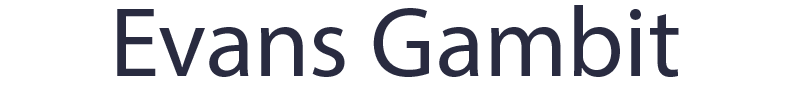
<style>
.page{position:relative;width:800px;height:100px;background:#ffffff}
.page>*{position:absolute;margin:0}
.t1{font:100px "MyriadPro-Regular";color:#292b40}
</style>
<div class="page">
<p class="t1" style="left:117px;top:5px;width:562px;height:72px">Evans Gambit</p>
</div>
